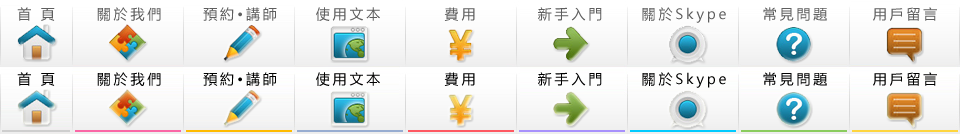
<style>
.page{position:relative;width:960px;height:134px}
.page>*{position:absolute;margin:0}
.t1{font:14px "MicrosoftYaHei";letter-spacing:0.2em;color:#5e5e5e}
.t2{font:14px "MicrosoftYaHei";letter-spacing:0.2em;color:#000000}
</style>
<div class="page">
<p class="t1" style="left:17px;top:7px;width:38px;height:14px">首 頁</p>
<p class="t1" style="left:97px;top:7px;width:64px;height:14px">關於我們</p>
<p class="t1" style="left:203px;top:7px;width:74px;height:14px">預約•講師</p>
<p class="t1" style="left:316px;top:7px;width:64px;height:14px">使用文本</p>
<p class="t1" style="left:444px;top:7px;width:31px;height:14px">費用</p>
<p class="t1" style="left:538px;top:7px;width:64px;height:14px">新手入門</p>
<p class="t1" style="left:642px;top:7px;width:84px;height:16px">關於Skype</p>
<p class="t1" style="left:763px;top:7px;width:64px;height:14px">常見問題</p>
<p class="t1" style="left:873px;top:7px;width:64px;height:14px">用戶留言</p>
<p class="t2" style="left:17px;top:72px;width:38px;height:14px">首 頁</p>
<p class="t2" style="left:97px;top:72px;width:64px;height:14px">關於我們</p>
<p class="t2" style="left:203px;top:72px;width:74px;height:14px">預約•講師</p>
<p class="t2" style="left:316px;top:72px;width:64px;height:14px">使用文本</p>
<p class="t2" style="left:444px;top:72px;width:31px;height:14px">費用</p>
<p class="t2" style="left:538px;top:72px;width:64px;height:14px">新手入門</p>
<p class="t2" style="left:642px;top:72px;width:84px;height:16px">關於Skype</p>
<p class="t2" style="left:763px;top:72px;width:64px;height:14px">常見問題</p>
<p class="t2" style="left:873px;top:72px;width:64px;height:14px">用戶留言</p>
</div>
